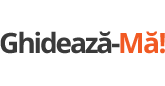
<style>
.page{position:relative;width:165px;height:86px;background:#ffffff}
.page>*{position:absolute;margin:0}
.t1{font:28px "OpenSans-Bold";letter-spacing:-0.075em;color:#3a3a3a}
.t2{font:28px "OpenSans-Bold";letter-spacing:-0.05em;color:#f15a23}
</style>
<div class="page">
<p class="t1" style="left:0px;top:31px;width:165px;height:23px">Ghidează-<span class="t2">Mă!</span></p>
</div>
